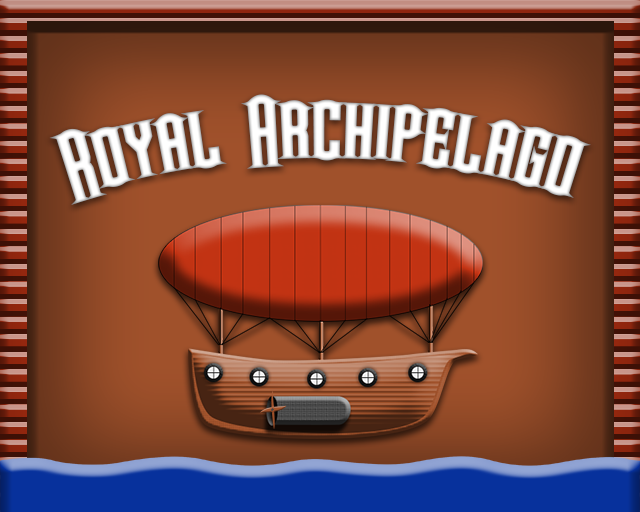
<style>
.page{position:relative;width:640px;height:512px}
.page>*{position:absolute;margin:0}
.t1{font:100px "Steamwreck-Bold";color:#ffffff}
</style>
<div class="page">
<p class="t1" style="left:49px;top:94px;width:542px;height:111px">Royal Archipelago</p>
</div>
